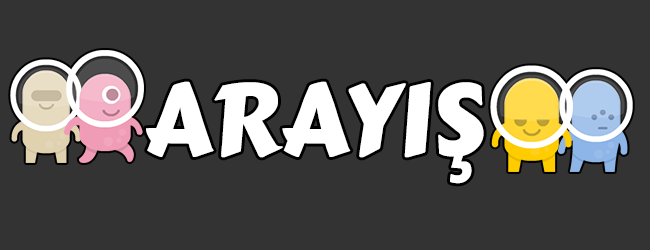
<style>
.page{position:relative;width:650px;height:250px;background:#333333}
.page>*{position:absolute;margin:0}
.t1{font:100px "CarterOne";color:#ffffff}
</style>
<div class="page">
<p class="t1" style="left:146px;top:81px;width:338px;height:103px">ARAYIŞ</p>
</div>
